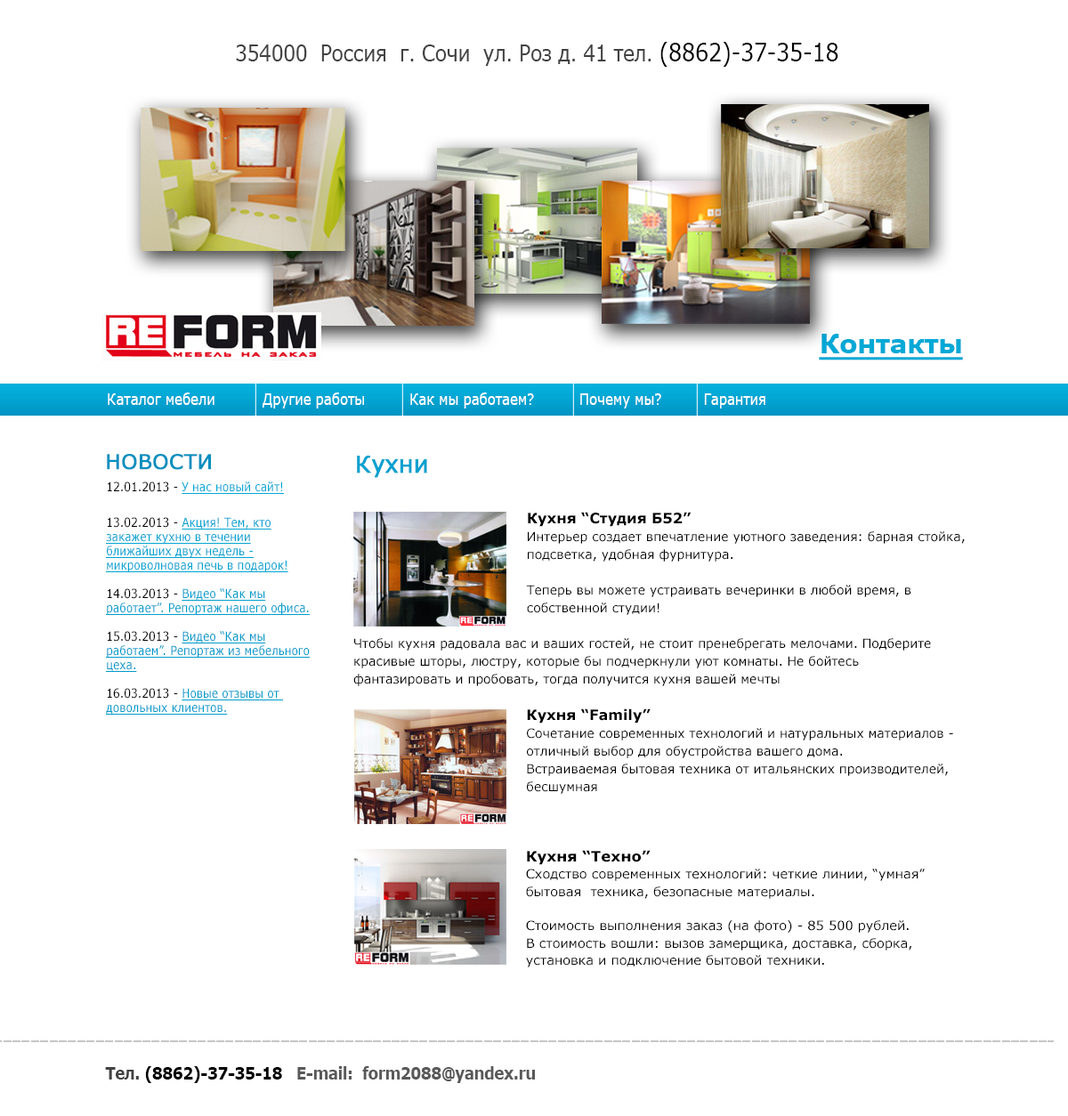
<style>
.page{position:relative;width:1068px;height:1116px;background:#ffffff}
.page>*{position:absolute;margin:0}
.t1{font:22.3px "Verdana";letter-spacing:-0.025em;color:#424242;scale:0.88 1}
.t2{font:24.6px "Verdana";letter-spacing:-0.025em;color:#000000;scale:0.88 1}
.t3{font:27px "Verdana-Bold";letter-spacing:-0.025em;color:#03a9d6;text-decoration:underline}
.t4{font:16px "Verdana";letter-spacing:-0.025em;color:#ffffff;scale:0.86 1}
.t5{font:20.5px "Verdana";color:#008fbf;font-weight:bold}
.t6{font:23.1px "Verdana";letter-spacing:-0.025em;color:#02a1cf;font-weight:bold}
.t7{font:12.5px/14.2px "Verdana";color:#03a4d3;text-decoration:underline;scale:0.87 1}
.t8{font:12.5px/21.4px "Verdana";color:#000000;scale:0.87 1}
.t9{font:12.5px/21.4px "Verdana";color:#03a9d7;text-decoration:underline;scale:0.87 1}
.t10{font:12.5px/14.2px "Verdana";color:#000000;scale:0.87 1}
.t11{font:12.5px/14.2px "Verdana";color:#029fce;text-decoration:underline;scale:0.87 1}
.t12{font:12.5px/14.2px "Verdana";color:#029bcb;text-decoration:underline;scale:0.87 1}
.t13{font:12.5px/14.2px "Verdana";color:#029dcd;text-decoration:underline;scale:0.87 1}
.t14{font:12.5px/17.8px "Verdana";color:#000000}
.t15{font:14.2px/17.8px "Verdana-Bold";color:#000000}
.t16{font:11.6px/17.8px "Verdana";color:#000000}
.t17{font:12.5px/17.2px "Verdana";color:#000000;scale:1.04 1}
.t18{font:14.2px/17.2px "Verdana-Bold";color:#000000;scale:1.04 1}
.t19{font:16.8px "Verdana-Bold";letter-spacing:-0.025em;color:#595959;scale:0.88 1}
.t20{font:23.5px "MyriadPro-Regular";letter-spacing:-0.025em;color:#424242;scale:0.88 1}
.t21{font:16.8px "Verdana-Bold";letter-spacing:-0.025em;color:#424242;scale:0.88 1}
.t22{font:16.8px "Verdana-Bold";letter-spacing:-0.025em;color:#000000;scale:0.88 1}
</style>
<div class="page">
<p class="t1" style="left:236px;top:42px;width:603px;height:25px">354000  Россия  г. Сочи  ул. Роз д. 41 тел. <span class="t2">(8862)-37-35-18</span></p>
<p class="t3" style="left:819px;top:334px;width:144px;height:27px">Контакты</p>
<p class="t4" style="left:108px;top:393px;width:658px;height:16px">Каталог мебели      Другие работы       Как мы работаем?          Почему мы?      Гарантия</p>
<p class="t5" style="left:107px;top:454px;width:104px;height:16px">НОВОСТИ</p>
<p class="t6" style="left:357px;top:456px;width:70px;height:22px">Кухни</p>
<p class="t7" style="left:106px;top:482px;width:205px;height:233px"><span class="t8">12.01.2013 - </span><span class="t9">У нас новый сайт!<br><br></span><span class="t10">13.02.2013 - </span>Акция! Тем, кто закажет кухню в течении ближайших двух недель - микроволновая печь в подарок!<br><br><span class="t10">14.03.2013 - </span><span class="t11">Видео “Как мы работает”. Репортаж нашего офиса.<br><br></span><span class="t10">15.03.2013 - </span><span class="t12">Видео “Как мы работаем”. Репортаж из мебельного цеха.<br><br></span><span class="t10">16.03.2013 - </span><span class="t13">Новые отзывы от <br>довольных клиентов.</span></p>
<p class="t14" style="left:526px;top:512px;width:439px;height:103px"><span class="t15">Кухня “Студия Б52”<br></span>Интерьер создает впечатление уютного заведения: барная стойка, <br>подсветка, удобная фурнитура.<br><br>Теперь вы можете устраивать вечеринки в любой время, в <br>собственной студии!</p>
<p class="t14" style="left:353px;top:638px;width:578px;height:48px">Чтобы кухня радовала вас и ваших гостей, не стоит пренебрегать мелочами. Подберите красивые шторы, люстру, которые бы подчеркнули уют комнаты. Не бойтесь фантазировать и пробовать, тогда получится кухня вашей мечты</p>
<p class="t14" style="left:527px;top:709px;width:426px;height:85px"><span class="t15">Кухня “Family”<br></span>Сочетание современных технологий и натуральных материалов - <br>отличный выбор для обустройства вашего дома.<br>Встраиваемая бытовая техника от итальянских производителей, <br>бесшумная <br><span class="t16">фурнитура, фильтр для воды. Микроволновая печь - в подарок!</span></p>
<p class="t17" style="left:526px;top:850px;width:399px;height:118px"><span class="t18">Кухня “Техно”<br></span>Сходство современных технологий: четкие линии, “умная” <br>бытовая  техника, безопасные материалы.<br><br>Стоимость выполнения заказ (на фото) - 85 500 рублей. <br>В стоимость вошли: вызов замерщика, доставка, сборка, <br>установка и подключение бытовой техники.</p>
<p class="t19" style="left:105px;top:1066px;width:430px;height:17px"><span class="t20"><br></span><span class="t21">Тел. </span><span class="t22">(8862)-37-35-18   </span>E-mail:  form2088@yandex.ru</p>
</div>
